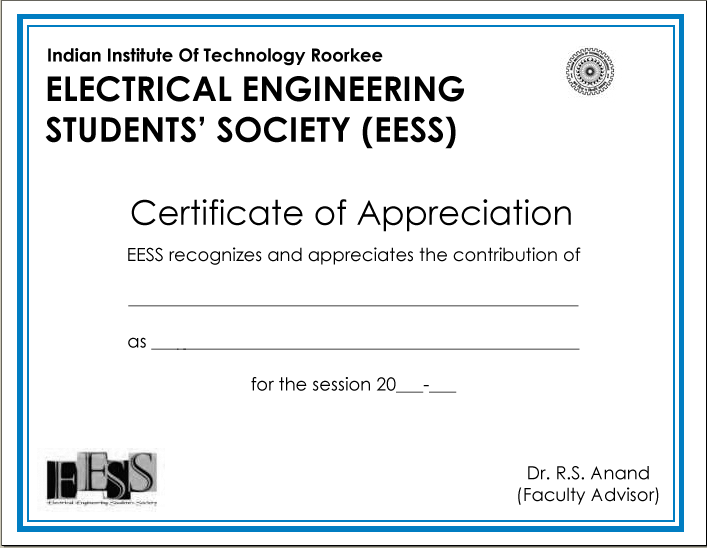
<style>
.page{position:relative;width:707px;height:548px;background:#ffffff}
.page>*{position:absolute;margin:0}
.t1{font:18px "CenturyGothic-Bold";color:#000000}
.t2{font:34px "CenturyGothic-Bold";color:#000000}
.t3{font:34px "CenturyGothic";color:#000000}
.t4{font:18px "CenturyGothic";color:#000000}
</style>
<div class="page">
<p class="t1" style="left:48px;top:48px;width:335px;height:18px"><span class="t2"><br></span>Indian Institute Of Technology Roorkee</p>
<p class="t2" style="left:45px;top:76px;width:419px;height:73px">ELECTRICAL ENGINEERING<br>STUDENTS’ SOCIETY (EESS)</p>
<p class="t3" style="left:131px;top:199px;width:440px;height:33px">Certificate of Appreciation</p>
<p class="t4" style="left:128px;top:247px;width:453px;height:146px;text-align:center">EESS recognizes and appreciates the contribution of<br><br>__________________________________________________<br><br>as ___ ____________________________________________<br><br>for the session 20___-___</p>
<p class="t4" style="left:518px;top:466px;width:141px;height:39px;text-align:center">Dr. R.S. Anand<br>(Faculty Advisor)</p>
</div>
